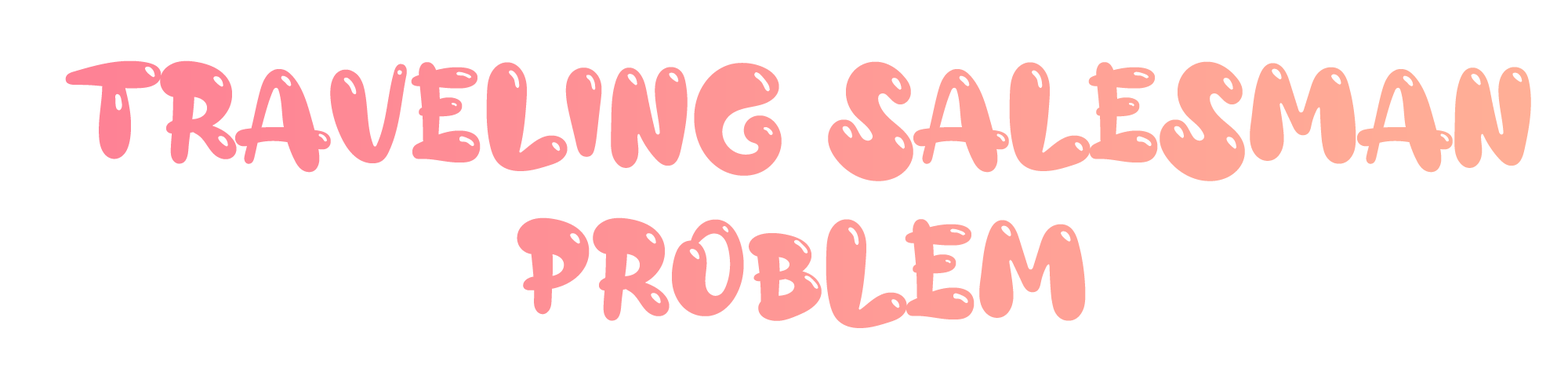
<style>
.page{position:relative;width:1568px;height:365px;background:#ffffff}
.page>*{position:absolute;margin:0}
.t1{font:130.7px "aAlloyInk";color:#ff9996}
</style>
<div class="page">
<p class="t1" style="left:65px;top:60px;width:1466px;height:268px;text-align:center">Traveling Salesman Problem</p>
</div>
